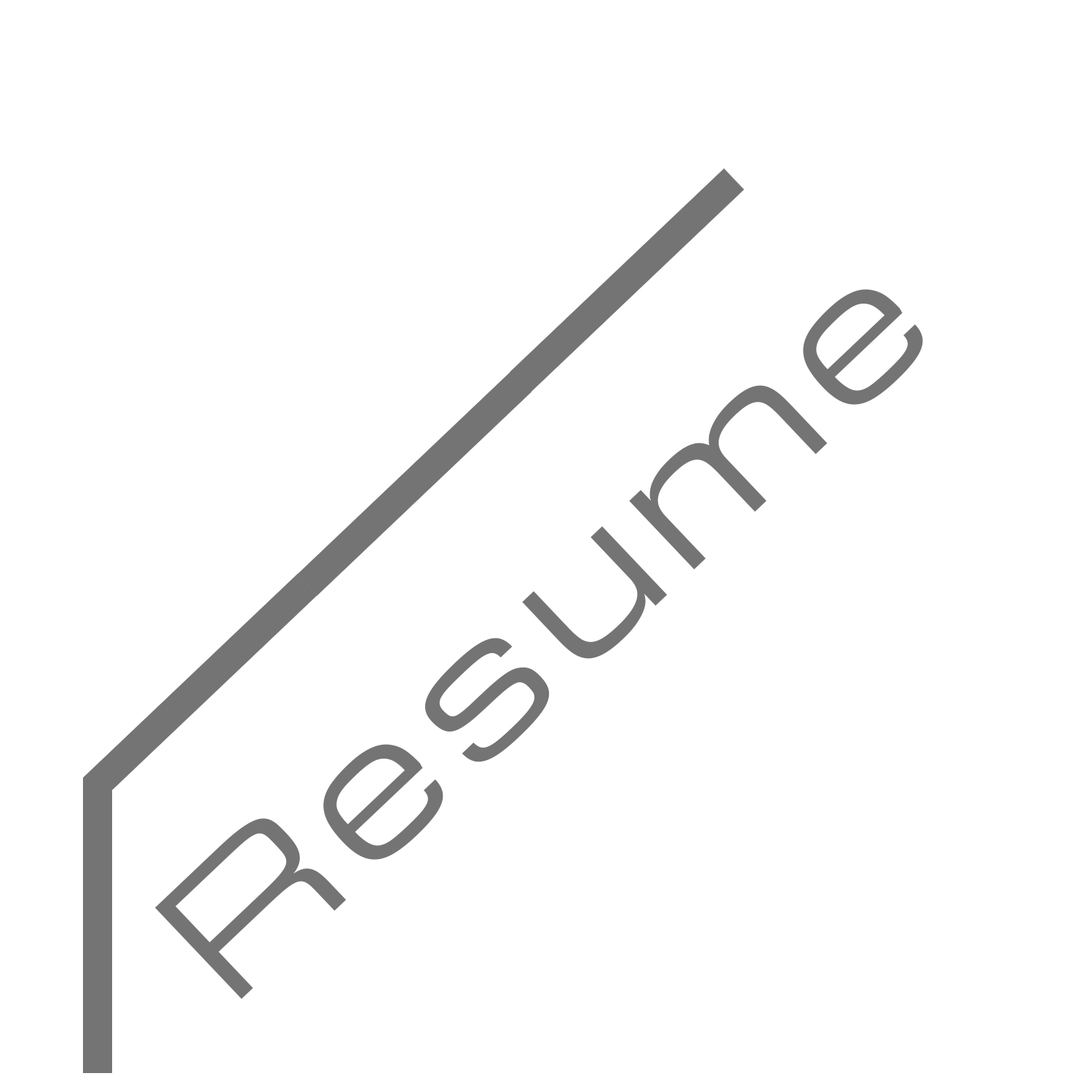
<style>
.page{position:relative;width:1092px;height:1092px;background:#ffffff}
.page>*{position:absolute;margin:0}
.t1{font:167.4px "Michroma";letter-spacing:0.1em;color:#747474}
</style>
<div class="page">
<p class="t1" style="left:154px;top:289px;width:769px;height:711px;rotate:-43deg">Resume</p>
</div>
